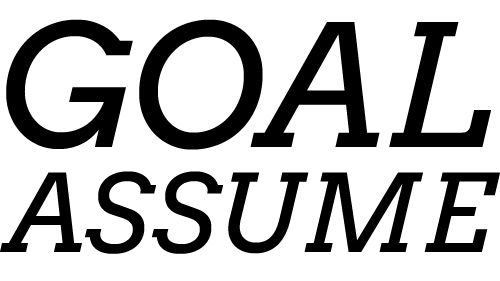
<style>
.page{position:relative;width:500px;height:281px;background:#ffffff}
.page>*{position:absolute;margin:0}
.t1{font:168.7px "Arvo-Italic";color:#000000}
.t2{font:107.3px "Arvo-Italic";color:#000000}
</style>
<div class="page">
<p class="t1" style="left:6px;top:19px;width:485px;height:131px">GOAL</p>
<p class="t2" style="left:0px;top:171px;width:500px;height:83px">ASSUME</p>
</div>
